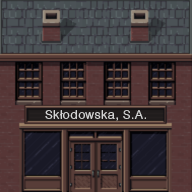
<style>
.page{position:relative;width:192px;height:192px}
.page>*{position:absolute;margin:0}
.t1{font:12px "HelveticaLTStd-Light";letter-spacing:0.05em;color:#d6d6d6}
</style>
<div class="page">
<p class="t1" style="left:45px;top:110px;width:101px;height:11px">Skłodowska, S.A.</p>
</div>
